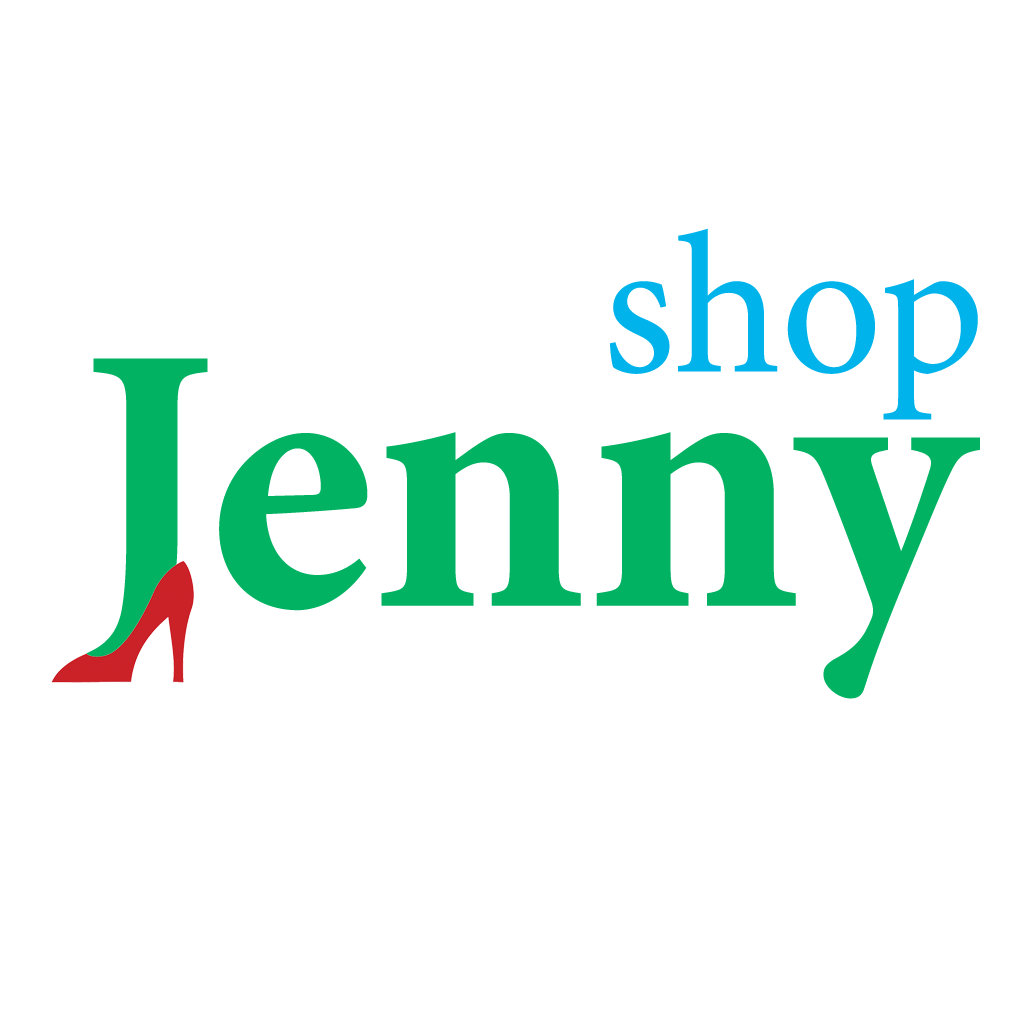
<style>
.page{position:relative;width:1024px;height:1024px;background:#ffffff}
.page>*{position:absolute;margin:0}
.t1{font:200px "MinionPro-Regular";color:#00b4eb}
.t2{font:380px "MinionPro-Bold";color:#01b262}
</style>
<div class="page">
<p class="t1" style="left:610px;top:228px;width:368px;height:192px">shop</p>
<p class="t2" style="left:86px;top:358px;width:894px;height:341px">Jenny</p>
</div>
